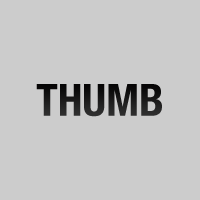
<style>
.page{position:relative;width:200px;height:200px;background:#cccccc}
.page>*{position:absolute;margin:0}
.t1{font:44.3px "HelveticaNeue-CondensedBold";color:#171717}
</style>
<div class="page">
<p class="t1" style="left:36px;top:84px;width:126px;height:33px">THUMB</p>
</div>
